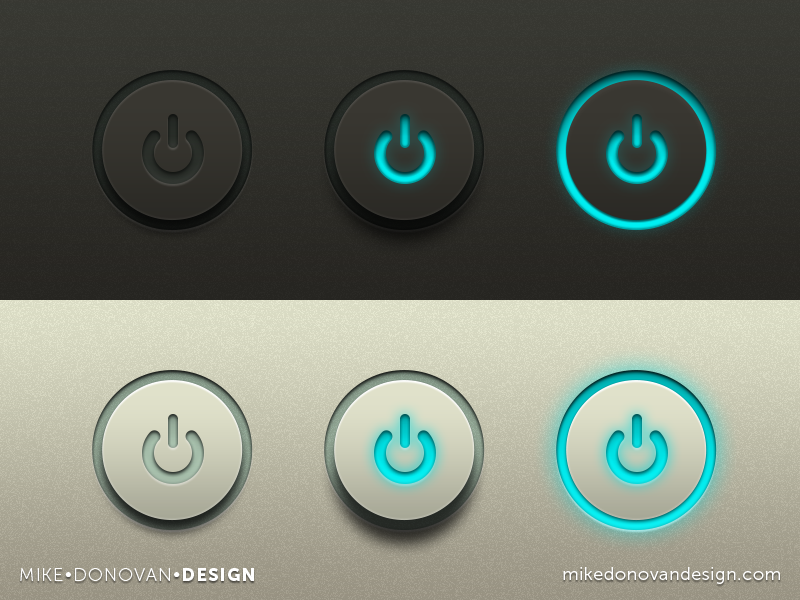
<style>
.page{position:relative;width:800px;height:600px}
.page>*{position:absolute;margin:0}
.t1{font:18px "MuseoSans-100";letter-spacing:0.062em;color:#ffffff;text-transform:uppercase}
.t2{font:18px "MuseoSans-900";letter-spacing:0.062em;color:#ffffff;text-transform:uppercase}
.t3{font:18px "MuseoSans-300";letter-spacing:0.031em;color:#ffffff}
</style>
<div class="page">
<p class="t1" style="left:20px;top:568px;width:234px;height:13px">Mike•Donovan•<span class="t2">Design</span></p>
<p class="t3" style="left:563px;top:567px;width:217px;height:17px">mikedonovandesign.com</p>
</div>
